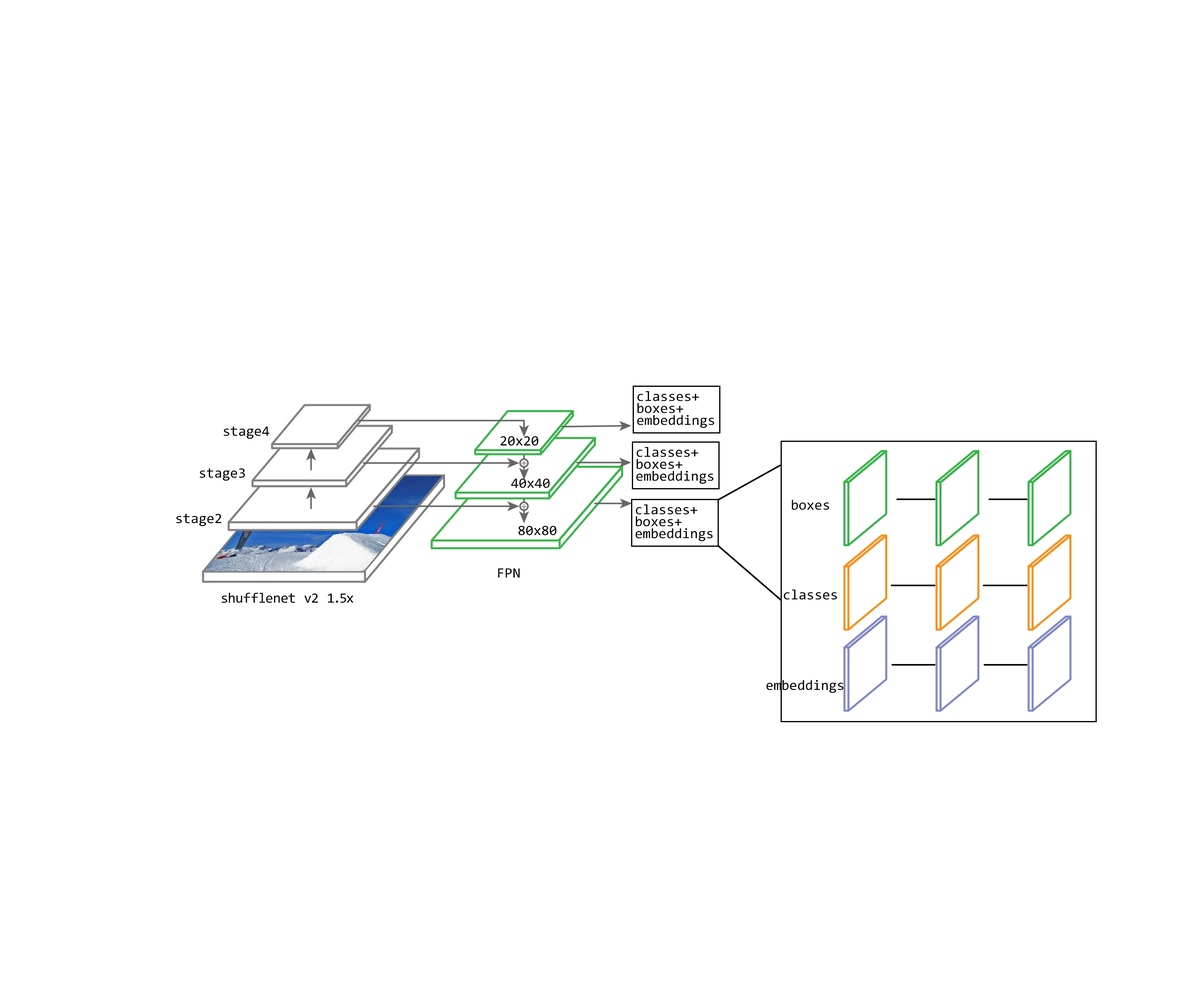
<style>
.page{position:relative;width:1196px;height:997px;background:#ffffff}
.page>*{position:absolute;margin:0}
.t1{font:14.4px/12px "Consolas";color:#000000}
.t2{font:14.4px "Consolas";color:#000000}
</style>
<div class="page">
<p class="t1" style="left:637px;top:391px;width:78px;height:37px">classes+<br>boxes+<br>embeddings</p>
<p class="t2" style="left:224px;top:426px;width:46px;height:13px">stage4</p>
<p class="t2" style="left:500px;top:436px;width:39px;height:10px">20x20</p>
<p class="t1" style="left:636px;top:447px;width:78px;height:37px">classes+<br>boxes+<br>embeddings</p>
<p class="t2" style="left:200px;top:468px;width:45px;height:13px">stage3</p>
<p class="t2" style="left:511px;top:478px;width:39px;height:10px">40x40</p>
<p class="t1" style="left:636px;top:504px;width:77px;height:37px">classes+<br>boxes+<br>embeddings</p>
<p class="t2" style="left:792px;top:500px;width:37px;height:10px">boxes</p>
<p class="t2" style="left:176px;top:514px;width:46px;height:12px">stage2</p>
<p class="t2" style="left:518px;top:526px;width:39px;height:9px">80x80</p>
<p class="t2" style="left:498px;top:568px;width:22px;height:10px">FPN</p>
<p class="t2" style="left:222px;top:593px;width:132px;height:10px">shufflenet v2 1.5x</p>
<p class="t2" style="left:784px;top:589px;width:53px;height:11px">classes</p>
<p class="t2" style="left:766px;top:680px;width:78px;height:13px">embeddings</p>
</div>
